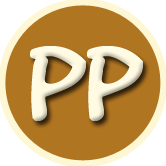
<style>
.page{position:relative;width:166px;height:166px;background:#b07521}
.page>*{position:absolute;margin:0}
.t1{font:120px "GoodDogCool";color:#fffae1}
</style>
<div class="page">
<p class="t1" style="left:30px;top:46px;width:113px;height:75px">PP</p>
</div>
